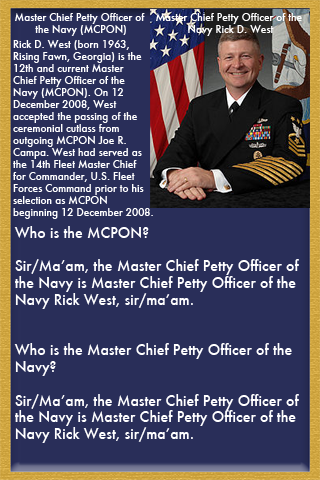
<style>
.page{position:relative;width:320px;height:480px;background:#292e59}
.page>*{position:absolute;margin:0}
.t1{font:10px "Futura-Medium";color:#ffffff}
.t2{font:14px "Futura-Medium";color:#ffffff}
</style>
<div class="page">
<p class="t1" style="left:15px;top:13px;width:130px;height:23px;text-align:center">Master Chief Petty Officer of <br>the Navy (MCPON)</p>
<p class="t1" style="left:156px;top:13px;width:146px;height:23px;text-align:center">Master Chief Petty Officer of the <br>Navy Rick D. West</p>
<p class="t1" style="left:13px;top:40px;width:140px;height:179px">Rick D. West (born 1963, <br>Rising Fawn, Georgia) is the <br>12th and current Master <br>Chief Petty Officer of the <br>Navy (MCPON). On 12 <br>December 2008, West <br>accepted the passing of the <br>ceremonial cutlass from <br>outgoing MCPON Joe R. <br>Campa. West had served as <br>the 14th Fleet Master Chief <br>for Commander, U.S. Fleet <br>Forces Command prior to his <br>selection as MCPON <br>beginning 12 December 2008.</p>
<p class="t2" style="left:14px;top:226px;width:285px;height:217px">Who is the MCPON?<br><br>Sir/Ma’am, the Master Chief Petty Officer of<br>the Navy is Master Chief Petty Officer of the<br>Navy Rick West, sir/ma’am.<br><br><br>Who is the Master Chief Petty Officer of the <br>Navy?<br><br>Sir/Ma’am, the Master Chief Petty Officer of<br>the Navy is Master Chief Petty Officer of the<br>Navy Rick West, sir/ma’am.</p>
</div>
